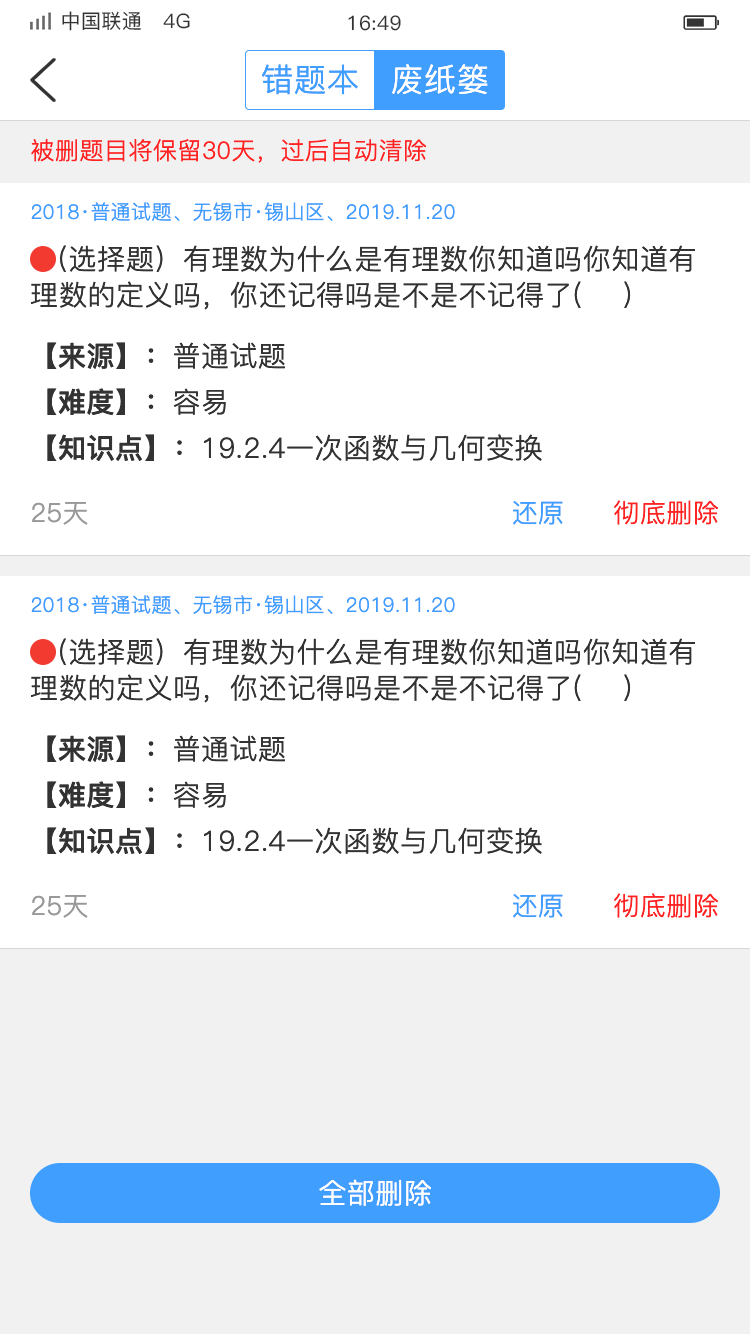
<style>
.page{position:relative;width:750px;height:1334px;background:#ffffff}
.page>*{position:absolute;margin:0}
.t1{font:20px "PingFang-SC-Medium";letter-spacing:0.02em;color:#333333}
.t2{font:32px "PingFang-SC-Regular";letter-spacing:0.02em;color:#409eff}
.t3{font:32px "PingFang-SC-Regular";letter-spacing:0.02em;color:#ffffff}
.t4{font:24px "PingFang-SC-Regular";letter-spacing:0.02em;color:#ff2323}
.t5{font:20px "PingFang-SC-Regular";letter-spacing:0.02em;color:#409eff}
.t6{font:28px/36px "PingFang-SC-Regular";letter-spacing:0.02em;color:#333333}
.t7{font:28px "PingFang-SC-Bold";letter-spacing:0.02em;color:#333333}
.t8{font:28px "PingFang-SC-Regular";letter-spacing:0.02em;color:#333333}
.t9{font:26px "PingFang-SC-Regular";letter-spacing:0.02em;color:#999999}
.t10{font:26px "PingFang-SC-Regular";letter-spacing:0.02em;color:#409eff}
.t11{font:26px "PingFang-SC-Regular";letter-spacing:0.02em;color:#ff2323}
.t12{font:28px "PingFang-SC-Regular";letter-spacing:0.02em;color:#ffffff}
</style>
<div class="page">
<p class="t1" style="left:62px;top:11px;width:128px;height:20px">中国联通   4G</p>
<p class="t1" style="left:348px;top:15px;width:53px;height:16px">16:49</p>
<p class="t2" style="left:261px;top:64px;width:97px;height:31px">错题本</p>
<p class="t3" style="left:392px;top:64px;width:96px;height:31px">废纸篓</p>
<p class="t4" style="left:31px;top:139px;width:396px;height:24px">被删题目将保留30天，过后自动清除</p>
<p class="t5" style="left:31px;top:202px;width:424px;height:19px">2018·普通试题、无锡市·锡山区、2019.11.20</p>
<p class="t6" style="left:30px;top:245px;width:665px;height:65px">（选择题）有理数为什么是有理数你知道吗你知道有理数的定义吗，你还记得吗是不是不记得了(    )</p>
<p class="t7" style="left:47px;top:342px;width:238px;height:27px">【来源】：<span class="t8">普通试题</span></p>
<p class="t7" style="left:47px;top:388px;width:179px;height:28px">【难度】：<span class="t8">容易</span></p>
<p class="t8" style="left:47px;top:434px;width:495px;height:27px"><span class="t7">【知识点】：</span>19.2.4一次函数与几何变换</p>
<p class="t9" style="left:32px;top:502px;width:56px;height:23px">25天</p>
<p class="t10" style="left:513px;top:501px;width:50px;height:24px">还原</p>
<p class="t11" style="left:614px;top:500px;width:104px;height:25px">彻底删除</p>
<p class="t5" style="left:31px;top:595px;width:424px;height:19px">2018·普通试题、无锡市·锡山区、2019.11.20</p>
<p class="t6" style="left:30px;top:638px;width:665px;height:65px">（选择题）有理数为什么是有理数你知道吗你知道有理数的定义吗，你还记得吗是不是不记得了(    )</p>
<p class="t7" style="left:47px;top:735px;width:238px;height:27px">【来源】：<span class="t8">普通试题</span></p>
<p class="t7" style="left:47px;top:781px;width:179px;height:28px">【难度】：<span class="t8">容易</span></p>
<p class="t8" style="left:47px;top:827px;width:495px;height:27px"><span class="t7">【知识点】：</span>19.2.4一次函数与几何变换</p>
<p class="t10" style="left:513px;top:894px;width:50px;height:24px">还原</p>
<p class="t11" style="left:614px;top:893px;width:104px;height:25px">彻底删除</p>
<p class="t9" style="left:32px;top:895px;width:56px;height:23px">25天</p>
<p class="t12" style="left:319px;top:1179px;width:112px;height:27px">全部删除</p>
</div>
